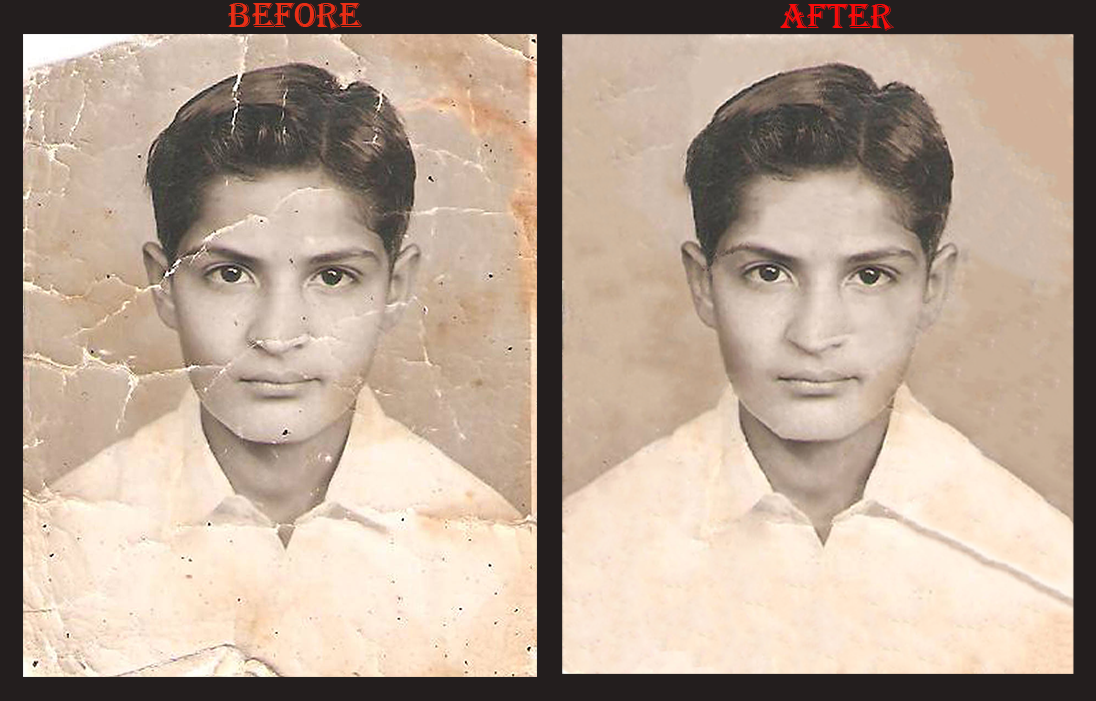
<style>
.page{position:relative;width:1096px;height:701px}
.page>*{position:absolute;margin:0}
.t1{font:36px "Algerian";color:#eb2e15}
.t2{font:30px "BritannicBold";color:#eb2e15}
.t3{font:36px "Algerian";color:#f90a0a}
.t4{font:36px "Algerian";color:#090808}
</style>
<div class="page">
<p class="t1" style="left:228px;top:3px;width:134px;height:27px"><span class="t2"> </span>Before</p>
<p class="t3" style="left:780px;top:4px;width:114px;height:27px"><span class="t4">      </span>AFter</p>
</div>
